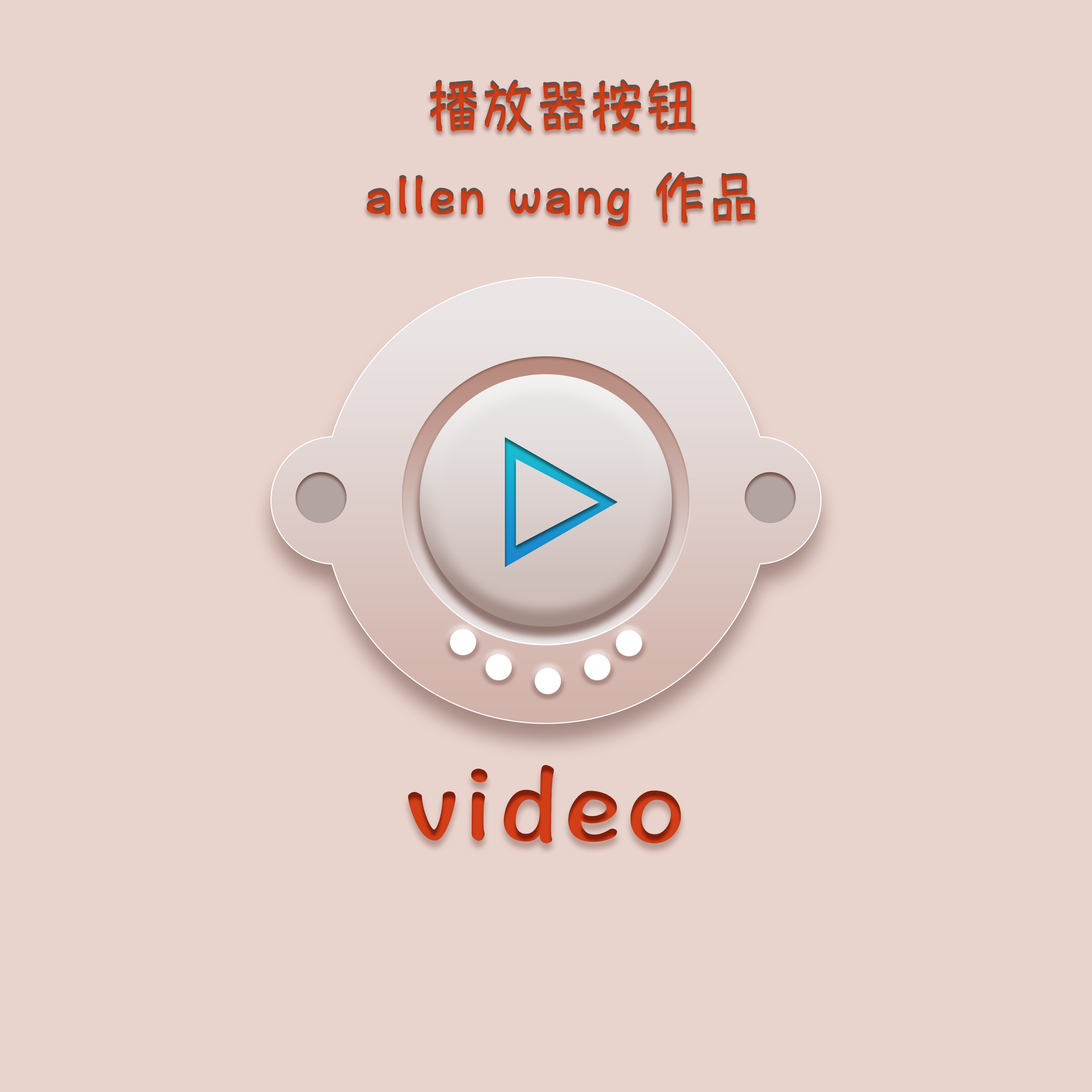
<style>
.page{position:relative;width:1092px;height:1092px;background:#e9d3cd}
.page>*{position:absolute;margin:0}
.t1{font:52.4px "HannotateSC-W7";letter-spacing:0.04em}
.t2{font:52.4px "HannotateSC-W7";letter-spacing:0.04em;color:#d13e17}
.t3{font:110.5px "HannotateSC-W7";letter-spacing:0.04em;color:#d13e17}
</style>
<div class="page">
<p class="t1" style="left:367px;top:79px;width:388px;height:145px;text-align:center">播放器按钮<br>allen wang 作品</p>
<p class="t2" style="left:367px;top:82px;width:388px;height:144px;text-align:center">播放器按钮<br>allen wang 作品</p>
<p class="t3" style="left:408px;top:765px;width:273px;height:78px">video</p>
</div>
